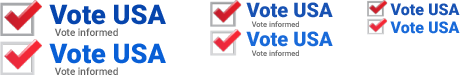
<style>
.page{position:relative;width:469px;height:78px;background:#ffffff}
.page>*{position:absolute;margin:0}
.t1{font:27px "Roboto-Black";color:#0645ad}
.t2{font:20px "Roboto-Black";color:#0645ad}
.t3{font:16px "Roboto-Black";color:#0645ad}
.t4{font:10px "Roboto-Medium";color:#666666}
.t5{font:7.5px "Roboto-Medium";color:#666666}
.t6{font:16px "Roboto-Black";color:#085fd6}
.t7{font:20px "Roboto-Black";color:#085fd6}
.t8{font:27px "Roboto-Black";color:#085fd6}
</style>
<div class="page">
<p class="t1" style="left:49px;top:4px;width:117px;height:21px">Vote USA</p>
<p class="t2" style="left:246px;top:2px;width:87px;height:16px">Vote USA</p>
<p class="t3" style="left:390px;top:3px;width:70px;height:13px">Vote USA</p>
<p class="t4" style="left:54px;top:28px;width:64px;height:8px">Vote informed</p>
<p class="t5" style="left:251px;top:21px;width:48px;height:6px">Vote informed</p>
<p class="t6" style="left:390px;top:21px;width:70px;height:13px">Vote USA</p>
<p class="t7" style="left:246px;top:31px;width:87px;height:16px">Vote USA</p>
<p class="t8" style="left:49px;top:43px;width:117px;height:21px">Vote USA</p>
<p class="t5" style="left:251px;top:50px;width:48px;height:6px">Vote informed</p>
<p class="t4" style="left:54px;top:67px;width:64px;height:8px">Vote informed</p>
</div>
